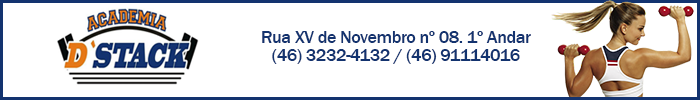
<style>
.page{position:relative;width:700px;height:100px;background:#ffffff}
.page>*{position:absolute;margin:0}
.t1{font:18px/18px "FranklinGothic-Medium";letter-spacing:-0.025em;color:#13336f}
</style>
<div class="page">
<p class="t1" style="left:262px;top:31px;width:269px;height:33px;text-align:center">Rua XV de Novembro nº 08. 1º Andar<br>(46) 3232-4132 / (46) 91114016</p>
</div>
